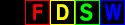
<style>
.page{position:relative;width:125px;height:25px;background:#000000}
.page>*{position:absolute;margin:0}
.t1{font:19.6px "Yj-TEUNTEUN--Bold";color:#ff0000}
.t2{font:20.1px "Yj-TEUNTEUN--Bold";color:#ffff00}
.t3{font:21.1px "Yj-TEUNTEUN--Bold";color:#00ff00}
.t4{font:20.3px "Yj-TEUNTEUN--Bold";color:#0000ff}
</style>
<div class="page">
<p class="t1" style="left:33px;top:4px;width:10px;height:16px">F</p>
<p class="t2" style="left:57px;top:4px;width:12px;height:16px">D</p>
<p class="t3" style="left:80px;top:3px;width:13px;height:18px">S</p>
<p class="t4" style="left:104px;top:3px;width:18px;height:17px">W</p>
</div>
